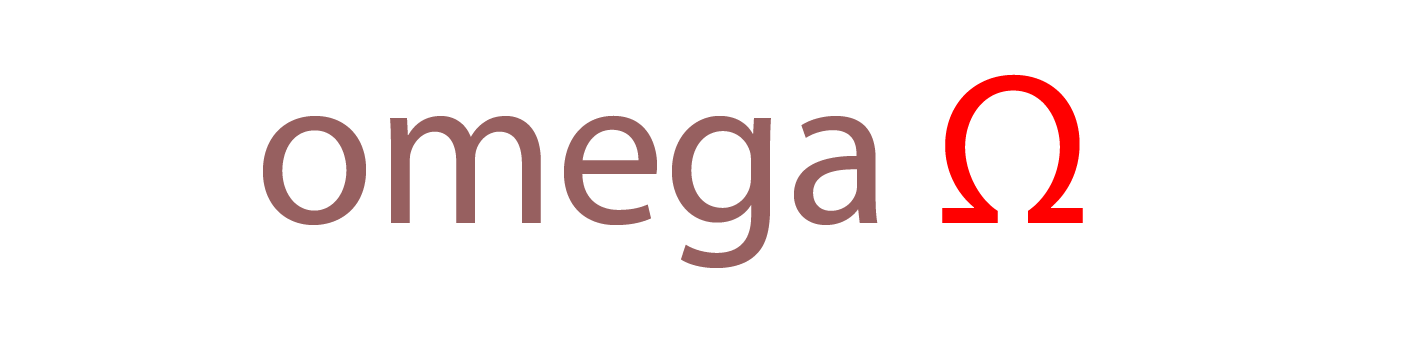
<style>
.page{position:relative;width:1417px;height:340px;background:#ffffff}
.page>*{position:absolute;margin:0}
.t1{font:217px "MyriadPro-Regular";color:#976060}
.t2{font:217px "MyriadPro-Regular";color:#ff0000}
</style>
<div class="page">
<p class="t1" style="left:263px;top:74px;width:820px;height:194px">omega<span class="t2"> Ω</span></p>
</div>
